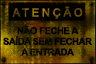
<style>
.page{position:relative;width:96px;height:64px}
.page>*{position:absolute;margin:0}
.t1{font:11.2px "ArialMT";letter-spacing:0.22em;text-transform:uppercase;font-weight:bold}
.t2{font:9.5px/10.7px "Arial-BoldMT";letter-spacing:-0.04em;color:#000000;text-transform:uppercase}
</style>
<div class="page">
<p class="t1" style="left:12px;top:6px;width:71px;height:13px">ATENÇÃO</p>
<p class="t2" style="left:3px;top:25px;width:89px;height:31px;text-align:center">Não feche a<br>saída sem fechar<br>a entrada</p>
</div>
